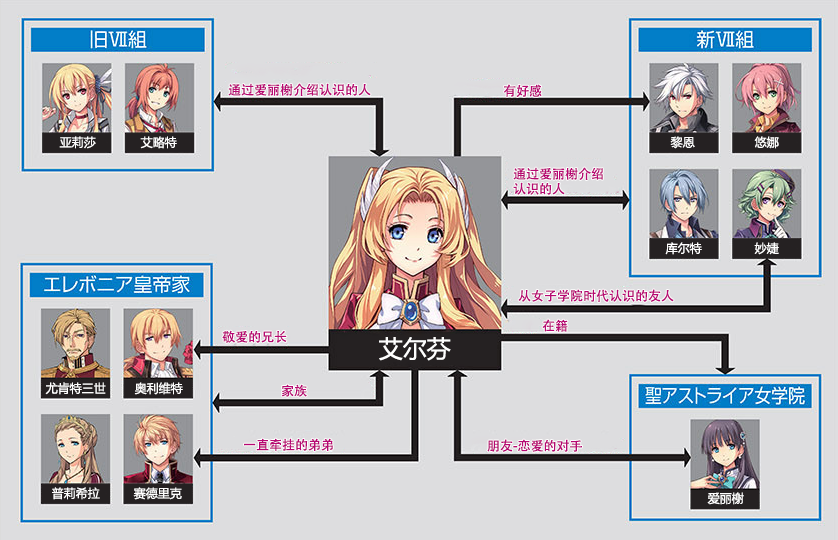
<style>
.page{position:relative;width:838px;height:540px;background:#dddddf}
.page>*{position:absolute;margin:0}
.t1{font:13px "AdobeHeitiStd-Regular";color:#b70773}
.t2{font:12px "MicrosoftYaHei";color:#ffffff}
.t3{font:13px/15px "AdobeHeitiStd-Regular";color:#b70773}
.t4{font:24px "MicrosoftYaHei";color:#ffffff}
</style>
<div class="page">
<p class="t1" style="left:228px;top:83px;width:143px;height:13px">通过爱丽榭介绍认识的人</p>
<p class="t1" style="left:503px;top:84px;width:39px;height:13px">有好感</p>
<p class="t2" style="left:59px;top:136px;width:37px;height:13px">亚莉莎</p>
<p class="t2" style="left:140px;top:136px;width:37px;height:13px">艾略特</p>
<p class="t2" style="left:670px;top:136px;width:25px;height:13px">黎恩</p>
<p class="t2" style="left:754px;top:136px;width:25px;height:13px">悠娜</p>
<p class="t3" style="left:513px;top:167px;width:90px;height:28px">通过爱丽榭介绍<br>认识的人</p>
<p class="t2" style="left:665px;top:242px;width:37px;height:13px">库尔特</p>
<p class="t2" style="left:754px;top:242px;width:25px;height:13px">妙婕</p>
<p class="t1" style="left:518px;top:289px;width:156px;height:13px">从女子学院时代认识的友人</p>
<p class="t1" style="left:542px;top:319px;width:26px;height:13px">在籍</p>
<p class="t1" style="left:222px;top:330px;width:65px;height:13px">敬爱的兄长</p>
<p class="t4" style="left:379px;top:337px;width:72px;height:24px">艾尔芬</p>
<p class="t2" style="left:45px;top:382px;width:61px;height:13px">尤肯特三世</p>
<p class="t2" style="left:134px;top:382px;width:49px;height:13px">奥利维特</p>
<p class="t1" style="left:281px;top:384px;width:26px;height:13px">家族</p>
<p class="t1" style="left:244px;top:438px;width:89px;height:13px">一直牵挂的弟弟</p>
<p class="t1" style="left:487px;top:439px;width:95px;height:13px">朋友-恋爱的对手</p>
<p class="t2" style="left:52px;top:487px;width:48px;height:13px">普莉希拉</p>
<p class="t2" style="left:133px;top:487px;width:49px;height:13px">赛德里克</p>
<p class="t2" style="left:707px;top:492px;width:37px;height:13px">爱丽榭</p>
</div>
